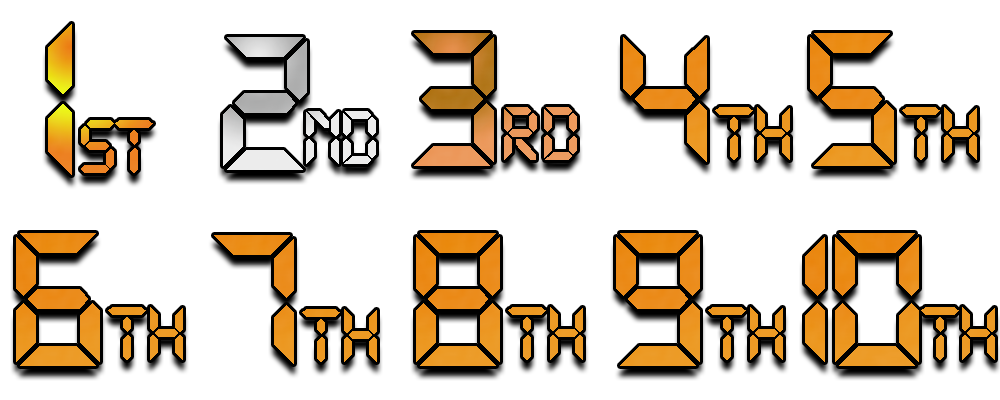
<style>
.page{position:relative;width:1000px;height:400px;background:#ffffff}
.page>*{position:absolute;margin:0}
.t1{font:250px "DS-Digital-Bold";letter-spacing:-0.075em}
.t2{font:83.3px "DS-Digital-Bold";letter-spacing:-0.075em}
.t3{font:83.3px "DS-Digital-Bold";letter-spacing:-0.1em}
.t4{font:208.3px "DS-Digital-Bold";letter-spacing:-0.025em}
.t5{font:83.3px "DS-Digital-Bold";letter-spacing:-0.025em}
.t6{font:208.3px "DS-Digital-Bold";letter-spacing:-0.025em;color:#eb8d1d}
.t7{font:83.3px "DS-Digital-Bold";letter-spacing:-0.025em;color:#eb8d1d}
.t8{font:83.3px "DS-Digital-Bold";letter-spacing:-0.075em;color:#eb8d1d}
.t9{font:208.3px "DS-Digital-Bold";letter-spacing:-0.025em;color:#eb931e}
.t10{font:83.3px "DS-Digital-Bold";letter-spacing:-0.025em;color:#eb931e}
.t11{font:83.3px "DS-Digital-Bold";letter-spacing:-0.075em;color:#eb931e}
.t12{font:208.3px "DS-Digital-Bold";letter-spacing:-0.025em;color:#eb8f1e}
.t13{font:83.3px "DS-Digital-Bold";letter-spacing:-0.025em;color:#eb8f1e}
.t14{font:83.3px "DS-Digital-Bold";letter-spacing:-0.075em;color:#eb8f1e}
.t15{font:208.3px "DS-Digital-Bold";letter-spacing:-0.025em;color:#eb8e1e}
.t16{font:83.3px "DS-Digital-Bold";letter-spacing:-0.025em;color:#eb8e1e}
.t17{font:83.3px "DS-Digital-Bold";letter-spacing:-0.075em;color:#eb8e1e}
.t18{font:208.3px "DS-Digital-Bold";letter-spacing:-0.1em;color:#eb921e}
.t19{font:208.3px "DS-Digital-Bold";letter-spacing:-0.05em;color:#eb921e}
.t20{font:83.3px "DS-Digital-Bold";letter-spacing:-0.05em;color:#eb921e}
.t21{font:83.3px "DS-Digital-Bold";letter-spacing:-0.075em;color:#eb921e}
.t22{font:208.3px "DS-Digital-Bold";letter-spacing:-0.025em;color:#eb911d}
.t23{font:83.3px "DS-Digital-Bold";letter-spacing:-0.025em;color:#eb911d}
.t24{font:83.3px "DS-Digital-Bold";letter-spacing:-0.075em;color:#eb911d}
</style>
<div class="page">
<p class="t1" style="left:48px;top:24px;width:105px;height:151px">1<span class="t2">S</span><span class="t3">t</span></p>
<p class="t4" style="left:414px;top:33px;width:163px;height:133px">3<span class="t5">r</span><span class="t2">d</span></p>
<p class="t6" style="left:623px;top:37px;width:167px;height:125px">4<span class="t7">t</span><span class="t8">h</span></p>
<p class="t9" style="left:810px;top:33px;width:167px;height:133px">5<span class="t10">t</span><span class="t11">h</span></p>
<p class="t9" style="left:16px;top:233px;width:167px;height:133px">6<span class="t10">t</span><span class="t11">h</span></p>
<p class="t12" style="left:416px;top:233px;width:167px;height:133px">8<span class="t13">t</span><span class="t14">h</span></p>
<p class="t15" style="left:616px;top:233px;width:167px;height:133px">9<span class="t16">t</span><span class="t17">h</span></p>
<p class="t18" style="left:805px;top:233px;width:190px;height:133px">1<span class="t19">0</span><span class="t20">t</span><span class="t21">h</span></p>
<p class="t22" style="left:214px;top:235px;width:163px;height:129px">7<span class="t23">t</span><span class="t24">h</span></p>
</div>
